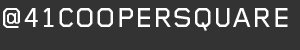
<style>
.page{position:relative;width:300px;height:50px;background:#333333}
.page>*{position:absolute;margin:0}
.t1{font:28px "FoundryGridnik-Medium";color:#ffffff}
</style>
<div class="page">
<p class="t1" style="left:3px;top:8px;width:285px;height:23px">@41COOPERSQUARE</p>
</div>
